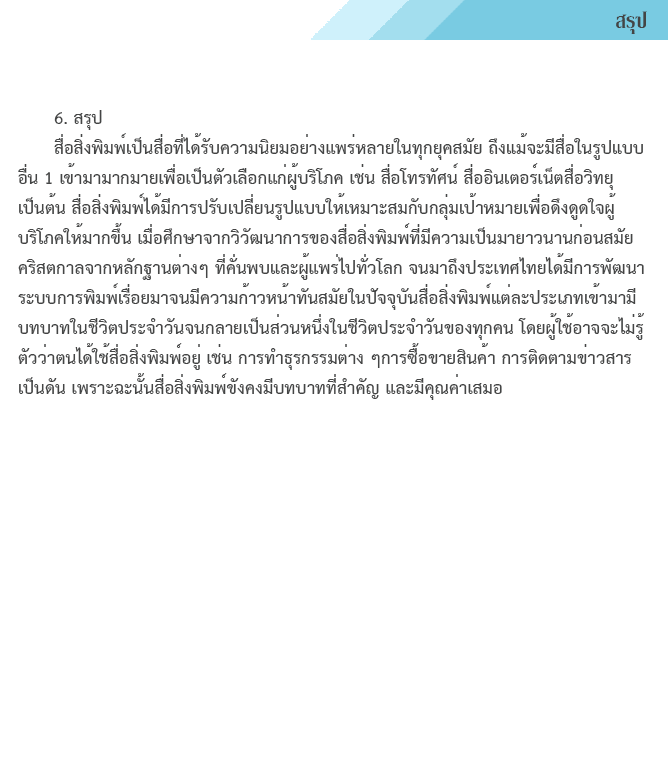
<style>
.page{position:relative;width:668px;height:760px;background:#ffffff}
.page>*{position:absolute;margin:0}
.t1{font:29.2px "KodchiangUPCBold";color:#444545}
.t2{font:25px "THSarabunPSK-Bold";color:#444545}
</style>
<div class="page">
<p class="t1" style="left:616px;top:11px;width:31px;height:23px">สรุป</p>
<p class="t2" style="left:18px;top:110px;width:626px;height:290px">6. สรุป<br> สื่อสิ่งพิมพ์เป็นสื่อที่ได้รับความนิยมอย่างแพร่หลายในทุกยุคสมัย ถึงแม้จะมีสื่อในรูปแบบอื่น 1 เข้ามามากมายเพื่อเป็นตัวเลือกแก่ผู้บริโภค เช่น สื่อโทรทัศน์ สื่ออินเตอร์เน็ตสื่อวิทยุเป็นต้น สื่อสิ่งพิมพ์ได้มีการปรับเปลี่ยนรูปแบบให้เหมาะสมกับกลุ่มเป้าหมายเพื่อดึงดูดใจผู้บริโภคให้มากขึ้น เมื่อศึกษาจากวิวัฒนาการของสื่อสิ่งพิมพ์ที่มีความเป็นมายาวนานก่อนสมัยคริสตกาลจากหลักฐานต่างๆ ที่คั่นพบและผู้แพร่ไปทั่วโลก จนมาถึงประเทศไทยได้มีการพัฒนาระบบการพิมพ์เรื่อยมาจนมีความก้าวหน้าทันสมัยในปัจจุบันสื่อสิ่งพิมพ์แต่ละประเภทเข้ามามีบทบาทในชีวิตประจำวันจนกลายเป็นส่วนหนึ่งในชีวิตประจำวันของทุกคน โดยผู้ใช้อาจจะไม่รู้ตัวว่าตนได้ใช้สื่อสิ่งพิมพ์อยู่ เช่น การทำธุรกรรมต่าง ๆการซื้อขายสินค้า การติดตามข่าวสาร เป็นดัน เพราะฉะนั้นสื่อสิ่งพิมพ์ขังคงมีบทบาทที่สำคัญ และมีคุณค่าเสมอ</p>
</div>
